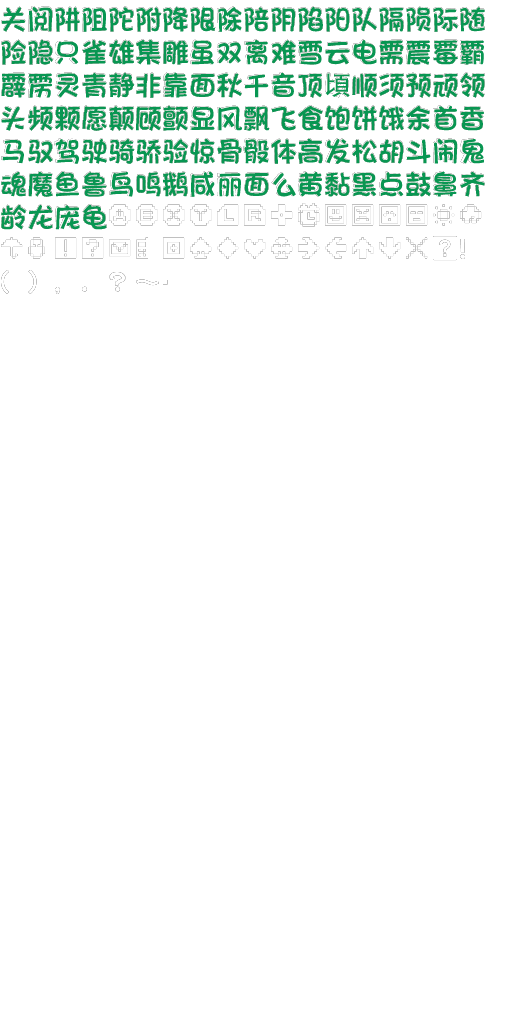
<style>
.page{position:relative;width:512px;height:1024px;background:#ffffff}
.page>*{position:absolute;margin:0}
.t1{font:27px/33px "DFPFangYuanW7";color:#089652}
.t2{font:27px/33px "AdobeHeitiStd-Regular";color:#089652}
</style>
<div class="page">
<p class="t1" style="left:1px;top:7px;width:484px;height:223px">关阅阱阻陀附降限除陪阴陷阳队隔陨际随<br>险隐只雀雄集雕虽双离难雪云电需震霉霸<br>霹雳灵青静非靠面秋千音顶<span class="t2">頃</span>顺须预顽领<br>头频颗愿颠顾颤显风飘飞食饱饼饿余首香<br>马驭驾驶骑骄验惊骨骰体高发松胡斗闹鬼<br>魂魔鱼鲁鸟鸣鹅咸丽面么黄黏黑点鼓鼻齐<br>龄龙庞龟</p>
</div>
